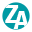
<style>
.page{position:relative;width:32px;height:32px;background:#ffffff}
.page>*{position:absolute;margin:0}
.t1{font:26px "AlegreyaSans-ExtraBold";color:#ffffff}
</style>
<div class="page">
<p class="t1" style="left:5px;top:5px;width:14px;height:18px">Z</p>
<p class="t1" style="left:13px;top:11px;width:16px;height:18px">A</p>
</div>
